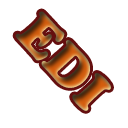
<style>
.page{position:relative;width:128px;height:128px;background:#ffffff}
.page>*{position:absolute;margin:0}
.t1{font:55.6px "CooperBlack"}
</style>
<div class="page">
<p class="t1" style="left:15px;top:11px;width:96px;height:100px;rotate:47deg">EDI</p>
</div>
